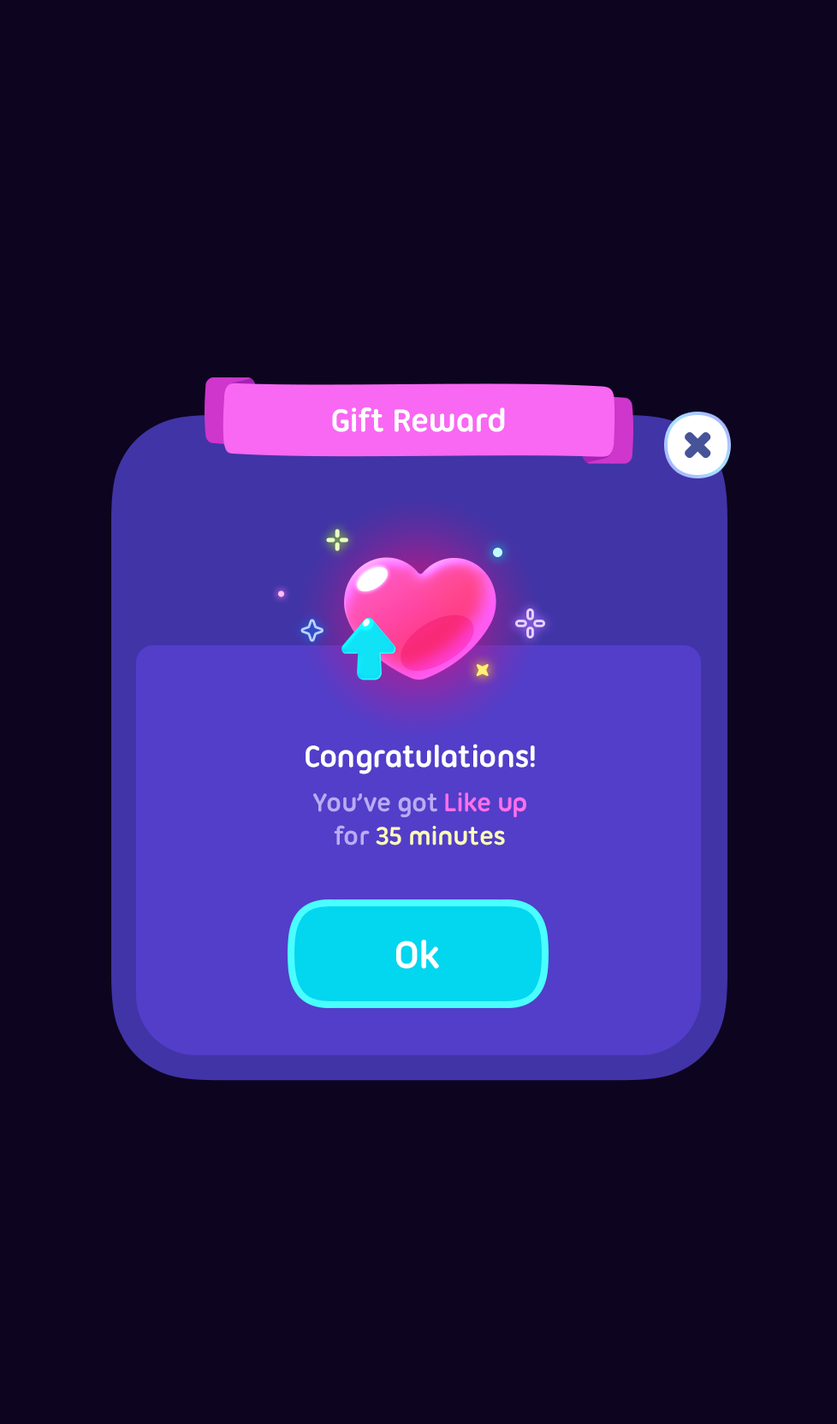
<style>
.page{position:relative;width:837px;height:1424px;background:#0d0420}
.page>*{position:absolute;margin:0}
.t1{font:34.2px "UbuntuTitling-Bold";letter-spacing:-0.025em;color:#ffffff}
.t2{font:32.5px "UbuntuTitling-Bold";letter-spacing:-0.025em;color:#ffffff}
.t3{font:27.4px "UbuntuTitling-Bold";letter-spacing:-0.025em;color:#bbabf4}
.t4{font:27.4px "UbuntuTitling-Bold";letter-spacing:-0.025em;color:#ff6fec}
.t5{font:27.4px "UbuntuTitling-Bold";letter-spacing:-0.025em;color:#fefbb7}
.t6{font:41.1px "UbuntuTitling-Bold";letter-spacing:-0.025em;color:#ffffff}
</style>
<div class="page">
<p class="t1" style="left:332px;top:407px;width:173px;height:25px">Gift Reward</p>
<p class="t2" style="left:306px;top:744px;width:229px;height:31px">Congratulations!</p>
<p class="t3" style="left:313px;top:793px;width:213px;height:53px;text-align:center">You’ve got <span class="t4">Like up<br></span>for <span class="t5">35 minutes</span></p>
<p class="t6" style="left:396px;top:940px;width:43px;height:29px">Ok</p>
</div>
